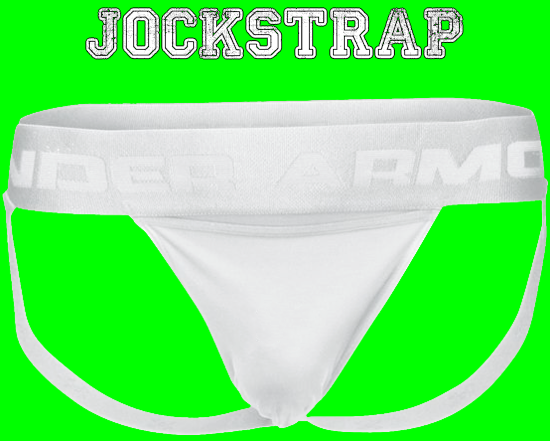
<style>
.page{position:relative;width:550px;height:441px;background:#00ff00}
.page>*{position:absolute;margin:0}
.t1{font:52.1px "Colleged";color:#ffffff}
</style>
<div class="page">
<p class="t1" style="left:86px;top:8px;width:377px;height:51px">Jockstrap</p>
</div>
